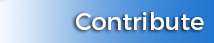
<style>
.page{position:relative;width:214px;height:43px}
.page>*{position:absolute;margin:0}
.t1{font:24px "Montserrat-Regular";color:#ffffff}
</style>
<div class="page">
<p class="t1" style="left:76px;top:12px;width:128px;height:18px">Contribute</p>
</div>
